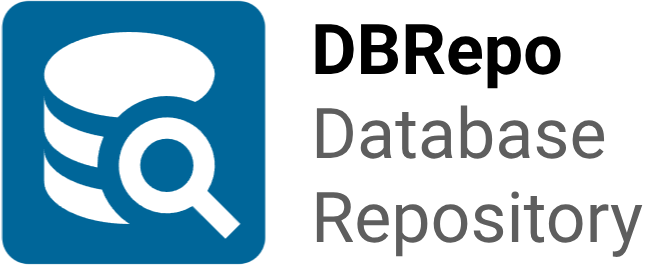
<style>
.page{position:relative;width:646px;height:265px;background:#ffffff}
.page>*{position:absolute;margin:0}
.t1{font:70px "Roboto-Regular";color:#5e5e5e}
.t2{font:70px "Roboto-Bold";color:#000000}
</style>
<div class="page">
<p class="t1" style="left:315px;top:24px;width:328px;height:233px"><span class="t2">DBRepo<br></span>Database<br>Repository</p>
</div>
